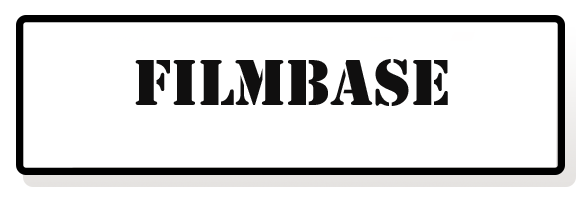
<style>
.page{position:relative;width:585px;height:210px;background:#ffffff}
.page>*{position:absolute;margin:0}
.t1{font:60px "StencilStd";color:#100f0f}
.t2{font:36px "MyriadPro-Regular";color:#100f0f}
</style>
<div class="page">
<p class="t1" style="left:135px;top:59px;width:313px;height:47px"><span class="t2"><br></span>FILMBASE</p>
</div>
